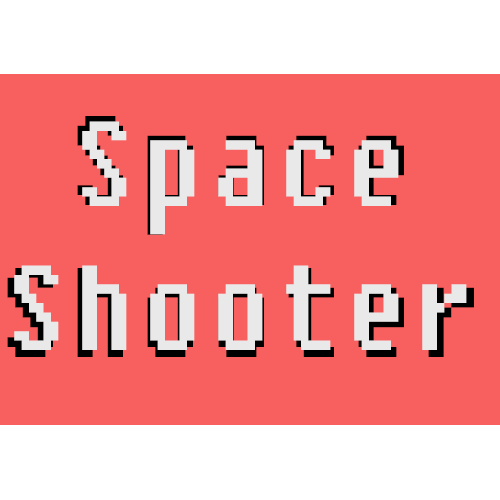
<style>
.page{position:relative;width:500px;height:500px;background:#f85f5f}
.page>*{position:absolute;margin:0}
.t1{font:126.7px "Fixedsys";letter-spacing:0.1em;scale:0.76 1}
.t2{font:120.1px "Fixedsys";letter-spacing:0.1em;color:#e9e9e9;scale:0.78 1}
</style>
<div class="page">
<p class="t1" style="left:7px;top:116px;width:467px;height:241px;text-align:center">Space<br>Shooter</p>
<p class="t2" style="left:14px;top:121px;width:453px;height:229px;text-align:center">Space<br>Shooter</p>
</div>
